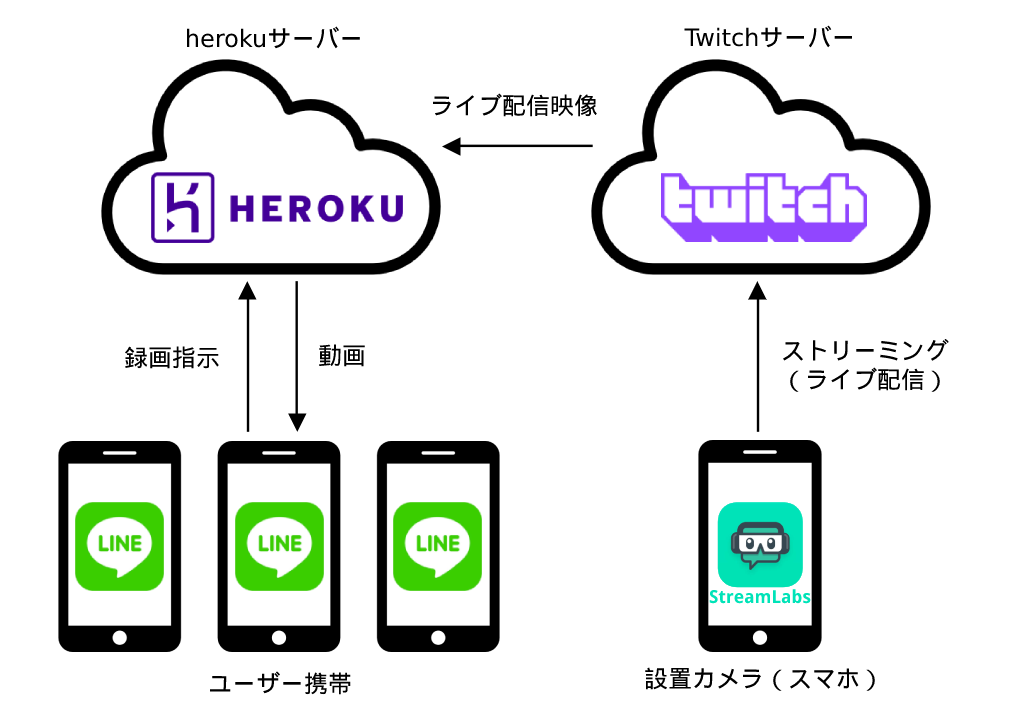
<style>
.page{position:relative;width:1010px;height:720px;background:#ffffff}
.page>*{position:absolute;margin:0}
.t1{font:24px "DejaVuSans";color:#000000}
.t2{font:24px "DroidSansFallback";color:#000000}
.t3{font:18px "DroidSans-Bold";color:#00e3b8}
</style>
<div class="page">
<p class="t1" style="left:186px;top:26px;width:174px;height:23px">heroku<span class="t2">サーバー</span></p>
<p class="t1" style="left:684px;top:25px;width:169px;height:23px">Twitch<span class="t2">サーバー</span></p>
<p class="t2" style="left:433px;top:93px;width:164px;height:24px">ライブ配信映像</p>
<p class="t2" style="left:782px;top:338px;width:167px;height:54px;text-align:center">ストリーミング<br>（ライブ配信）</p>
<p class="t2" style="left:125px;top:346px;width:94px;height:23px">録画指示</p>
<p class="t2" style="left:319px;top:344px;width:46px;height:23px">動画</p>
<p class="t3" style="left:709px;top:589px;width:102px;height:15px">StreamLabs</p>
<p class="t2" style="left:209px;top:671px;width:142px;height:24px">ユーザー携帯</p>
<p class="t2" style="left:645px;top:667px;width:230px;height:24px">設置カメラ（スマホ）</p>
</div>
